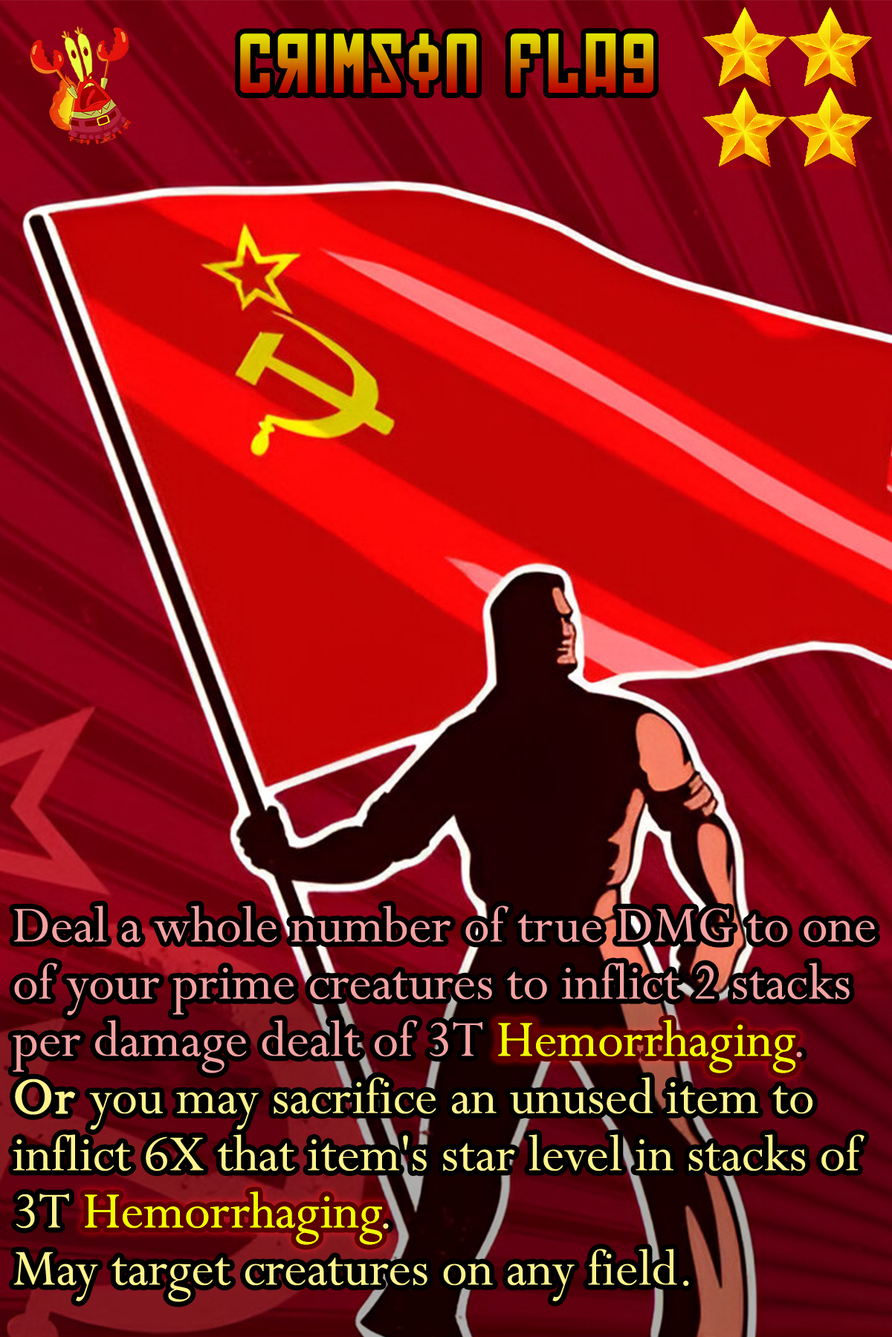
<style>
.page{position:relative;width:892px;height:1337px}
.page>*{position:absolute;margin:0}
.t1{font:140.4px "Soviet"}
.t2{font:56.5px/57.2px "Perpetua";color:#f4a1a1}
.t3{font:56.5px/57.2px "Perpetua";color:#f0ff00}
.t4{font:56.5px/57.2px "Perpetua";color:#fff38d;font-weight:bold}
.t5{font:56.5px/57.2px "Perpetua";color:#fff38d}
.t6{font:56.5px "Perpetua";color:#f0ff00}
</style>
<div class="page">
<p class="t1" style="left:240px;top:33px;width:413px;height:60px">Crimson Flag</p>
<p class="t2" style="left:13px;top:906px;width:862px;height:396px">Deal a whole number of true DMG to one of your prime creatures to inflict 2 stacks per damage dealt of 3T <span class="t3">Hemorrhaging</span>.<br><span class="t4">Or</span><span class="t5"> you may sacrifice an unused item to inflict 6X that item's star level in stacks of 3T </span><span class="t3">Hemorrhaging</span><span class="t5">.<br>May target creatures on any field.</span></p>
<p class="t6" style="left:498px;top:1020px;width:297px;height:54px">Hemorrhaging</p>
<p class="t6" style="left:85px;top:1192px;width:297px;height:53px">Hemorrhaging</p>
</div>
